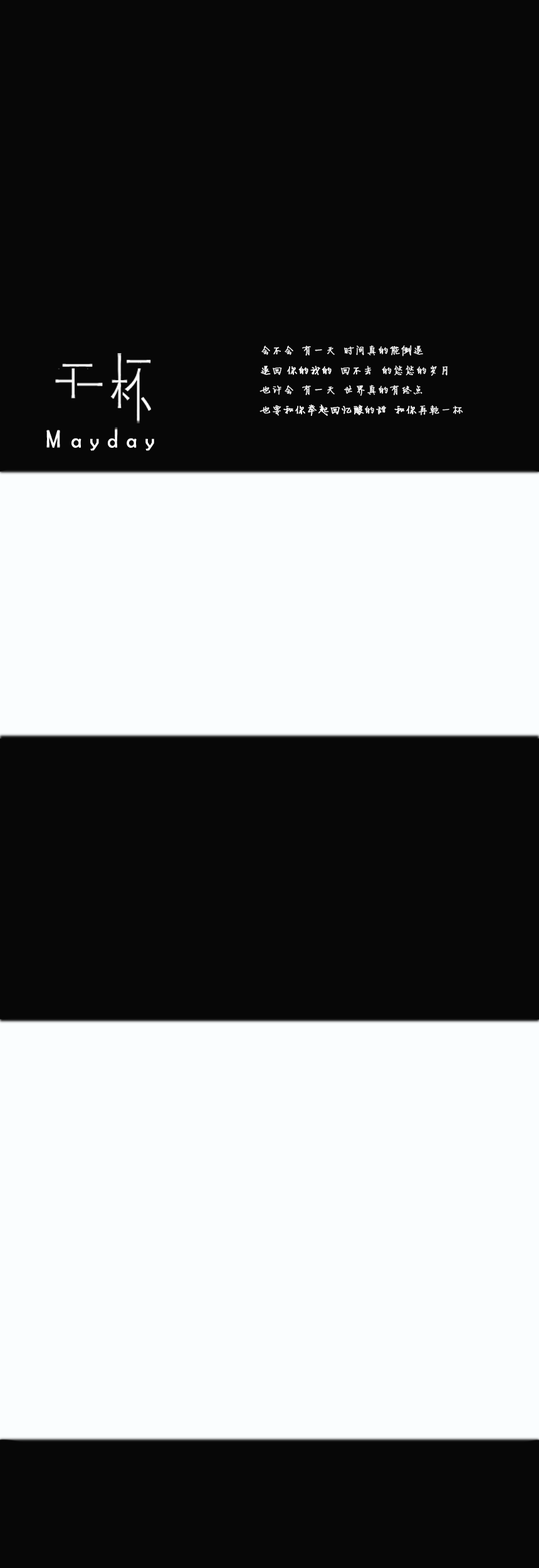
<style>
.page{position:relative;width:539px;height:1568px;background:#070707}
.page>*{position:absolute;margin:0}
.t1{font:11.3px "FZJLJW--GB1-0";color:#fdfdfd;font-weight:bold}
</style>
<div class="page">
<p class="t1" style="left:260px;top:345px;width:204px;height:71px">会不会  有一天  时间真的能倒退<br>退回 你的我的  回不去  的悠悠的岁月<br>也许会  有一天  世界真的有终点<br>也要和你举起回忆酿的甜  和你再乾一杯</p>
</div>
